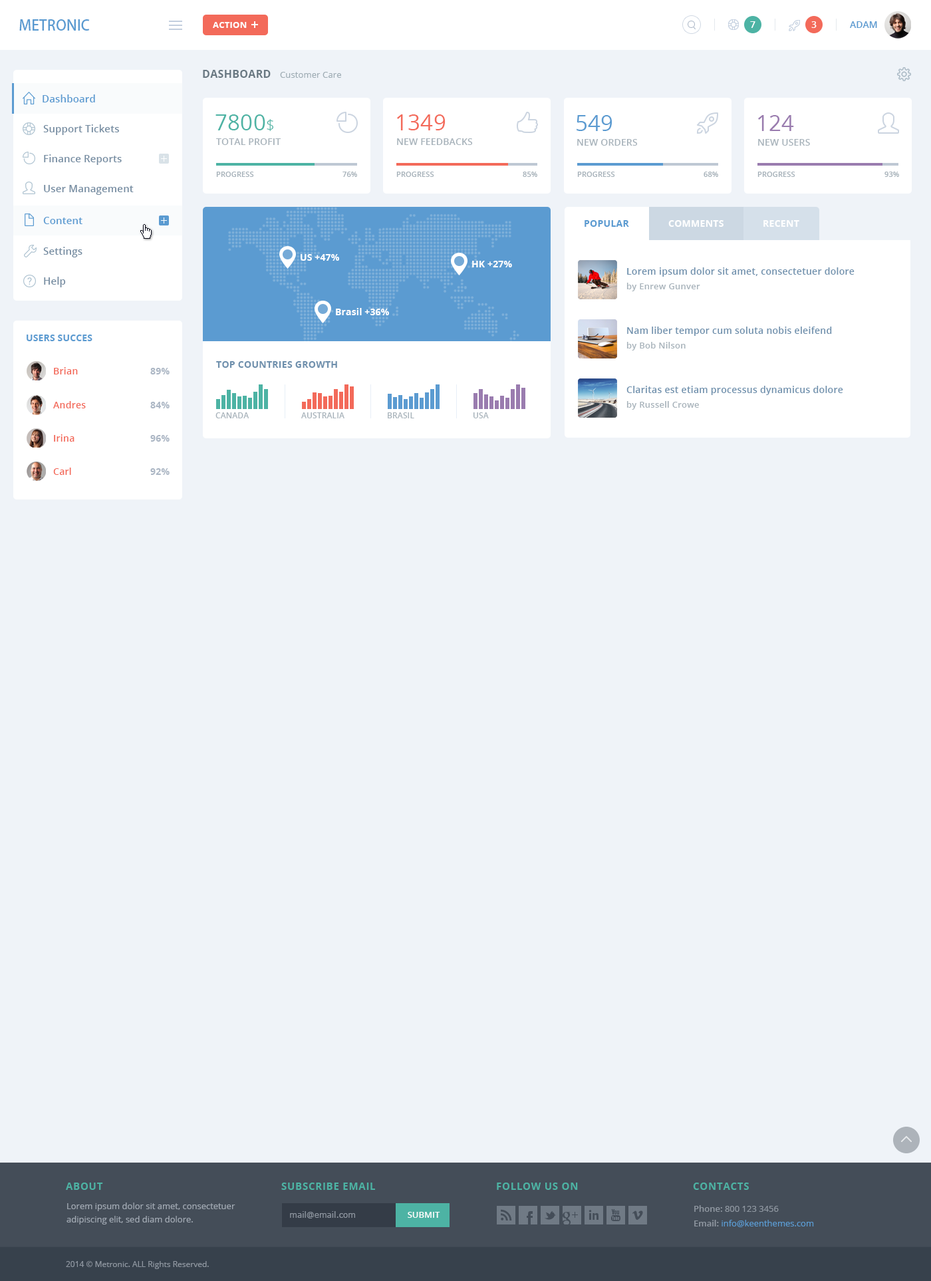
<style>
.page{position:relative;width:931px;height:1281px;background:#eff3f8}
.page>*{position:absolute;margin:0}
.t1{font:14.6px "KozGoPro-Medium";color:#5b9bd1}
.t2{font:8.6px "OpenSans-Bold";letter-spacing:0.02em;color:#ffffff}
.t3{font:9.3px "OpenSans-Semibold";letter-spacing:0.01em;color:#ffffff}
.t4{font:9.3px "OpenSans-Semibold";color:#5b9bd1}
.t5{font:10.6px "OpenSans-Bold";letter-spacing:0.02em;color:#697882}
.t6{font:8.6px "OpenSans";letter-spacing:0.01em;color:#9eacb4}
.t7{font:10px "OpenSans-Semibold";letter-spacing:0.01em;color:#5b9bd1}
.t8{font:10px "OpenSans-Semibold";letter-spacing:0.01em;color:#768da2}
.t9{font:21.9px "OpenSans";letter-spacing:0.01em;color:#4db3a4}
.t10{font:15.3px "OpenSans-Light";letter-spacing:0.01em;color:#4db3a4}
.t11{font:21.9px "OpenSans";letter-spacing:0.01em;color:#f36a5a}
.t12{font:21.9px "OpenSans";letter-spacing:0.01em;color:#5b9bd1}
.t13{font:21.9px "OpenSans";letter-spacing:0.01em;color:#9a7caf}
.t14{font:9.3px "OpenSans-Semibold";letter-spacing:0.01em;color:#a8b3bb}
.t15{font:7.3px "OpenSans-Semibold";letter-spacing:0.01em;color:#a8b3bb}
.t16{font:9.3px "OpenSans-Bold";letter-spacing:0.02em;color:#5b9bd1}
.t17{font:9.3px "OpenSans-Bold";letter-spacing:0.02em;color:#ffffff}
.t18{font:9.3px "OpenSans-Bold";letter-spacing:0.01em;color:#ffffff}
.t19{font:9.3px "OpenSans-Semibold";letter-spacing:0.02em;color:#6f90ad}
.t20{font:8.6px "OpenSans-Semibold";letter-spacing:0.02em;color:#a8b3bb}
.t21{font:9.3px "OpenSans-Bold";letter-spacing:0.01em;color:#5b9bd1}
.t22{font:9.3px "OpenSans-Bold";letter-spacing:0.02em;color:#6f90ad}
.t23{font:9.3px "OpenSans-Semibold";letter-spacing:0.02em;color:#f36a5a}
.t24{font:9.3px "OpenSans-Bold";letter-spacing:0.02em;color:#abb6c4}
.t25{font:8px "OpenSans-Semibold";letter-spacing:0.01em;color:#a8b3bb}
.t26{font:10px "OpenSans-Bold";letter-spacing:0.05em;color:#4db3a4}
.t27{font:8.6px/13.3px "OpenSans";color:#a1a9b3}
.t28{font:8.6px/14.6px "OpenSans";color:#5b9bd1}
.t29{font:8.6px/14.6px "OpenSans-Semibold";color:#8f97a1}
.t30{font:8.6px/14.6px "OpenSans";color:#8f97a1}
.t31{font:8px "Verdana";color:#8f97a1}
.t32{font:8.6px "OpenSans-Semibold";color:#fefefe}
.t33{font:8px "OpenSans";color:#8f97a1}
</style>
<div class="page">
<p class="t1" style="left:19px;top:19px;width:71px;height:12px">METRONIC</p>
<p class="t2" style="left:213px;top:22px;width:34px;height:6px">ACTION</p>
<p class="t3" style="left:750px;top:21px;width:5px;height:7px">7</p>
<p class="t3" style="left:811px;top:21px;width:6px;height:7px">3</p>
<p class="t4" style="left:850px;top:21px;width:27px;height:7px">ADAM</p>
<p class="t5" style="left:203px;top:70px;width:68px;height:8px">DASHBOARD</p>
<p class="t6" style="left:280px;top:72px;width:61px;height:6px">Customer Care</p>
<p class="t7" style="left:43px;top:94px;width:52px;height:8px">Dashboard</p>
<p class="t8" style="left:43px;top:124px;width:76px;height:11px">Support Tickets</p>
<p class="t9" style="left:215px;top:114px;width:58px;height:17px">7800<span class="t10">$</span></p>
<p class="t11" style="left:397px;top:114px;width:49px;height:16px">1349</p>
<p class="t12" style="left:577px;top:115px;width:35px;height:16px">549</p>
<p class="t13" style="left:758px;top:115px;width:36px;height:16px">124</p>
<p class="t14" style="left:216px;top:138px;width:65px;height:7px">TOTAL PROFIT</p>
<p class="t14" style="left:397px;top:138px;width:76px;height:7px">NEW FEEDBACKS</p>
<p class="t14" style="left:577px;top:139px;width:61px;height:7px">NEW ORDERS</p>
<p class="t14" style="left:758px;top:139px;width:52px;height:7px">NEW USERS</p>
<p class="t8" style="left:44px;top:154px;width:78px;height:11px">Finance Reports</p>
<p class="t15" style="left:216px;top:172px;width:38px;height:5px">PROGRESS</p>
<p class="t15" style="left:342px;top:172px;width:15px;height:5px">76%</p>
<p class="t15" style="left:396px;top:172px;width:38px;height:5px">PROGRESS</p>
<p class="t15" style="left:523px;top:172px;width:14px;height:5px">85%</p>
<p class="t15" style="left:577px;top:172px;width:38px;height:5px">PROGRESS</p>
<p class="t15" style="left:704px;top:172px;width:14px;height:5px">68%</p>
<p class="t15" style="left:757px;top:172px;width:38px;height:5px">PROGRESS</p>
<p class="t15" style="left:884px;top:172px;width:15px;height:5px">93%</p>
<p class="t8" style="left:44px;top:185px;width:90px;height:10px">User Management</p>
<p class="t7" style="left:43px;top:217px;width:39px;height:7px">Content</p>
<p class="t16" style="left:585px;top:220px;width:44px;height:7px">POPULAR</p>
<p class="t17" style="left:668px;top:220px;width:56px;height:7px">COMMENTS</p>
<p class="t17" style="left:763px;top:220px;width:36px;height:7px">RECENT</p>
<p class="t8" style="left:43px;top:247px;width:39px;height:10px">Settings</p>
<p class="t18" style="left:301px;top:254px;width:38px;height:7px">US +47%</p>
<p class="t18" style="left:472px;top:261px;width:40px;height:6px">HK +27%</p>
<p class="t19" style="left:627px;top:267px;width:228px;height:10px">Lorem ipsum dolor sit amet, consectetuer dolore</p>
<p class="t8" style="left:44px;top:277px;width:22px;height:10px">Help</p>
<p class="t20" style="left:626px;top:283px;width:74px;height:8px">by Enrew Gunver</p>
<p class="t18" style="left:336px;top:308px;width:53px;height:7px">Brasil +36%</p>
<p class="t19" style="left:627px;top:327px;width:205px;height:9px">Nam liber tempor cum soluta nobis eleifend</p>
<p class="t21" style="left:27px;top:334px;width:65px;height:7px">USERS SUCCES</p>
<p class="t20" style="left:626px;top:342px;width:60px;height:8px">by Bob Nilson</p>
<p class="t22" style="left:216px;top:361px;width:121px;height:7px">TOP COUNTRIES GROWTH</p>
<p class="t23" style="left:54px;top:367px;width:24px;height:7px">Brian</p>
<p class="t24" style="left:150px;top:368px;width:20px;height:6px">89%</p>
<p class="t19" style="left:626px;top:386px;width:217px;height:9px">Claritas est etiam processus dynamicus dolore</p>
<p class="t23" style="left:53px;top:401px;width:33px;height:7px">Andres</p>
<p class="t24" style="left:150px;top:402px;width:20px;height:6px">84%</p>
<p class="t20" style="left:626px;top:401px;width:73px;height:9px">by Russell Crowe</p>
<p class="t25" style="left:215px;top:412px;width:34px;height:6px">CANADA</p>
<p class="t25" style="left:301px;top:412px;width:43px;height:6px">AUSTRALIA</p>
<p class="t25" style="left:388px;top:412px;width:26px;height:6px">BRASIL</p>
<p class="t25" style="left:473px;top:412px;width:16px;height:6px">USA</p>
<p class="t23" style="left:54px;top:434px;width:20px;height:8px">Irina</p>
<p class="t24" style="left:150px;top:435px;width:20px;height:7px">96%</p>
<p class="t23" style="left:53px;top:467px;width:18px;height:8px">Carl</p>
<p class="t24" style="left:150px;top:468px;width:20px;height:7px">92%</p>
<p class="t26" style="left:66px;top:1182px;width:37px;height:8px">ABOUT</p>
<p class="t26" style="left:281px;top:1182px;width:94px;height:8px">SUBSCRIBE EMAIL</p>
<p class="t26" style="left:497px;top:1182px;width:81px;height:8px">FOLLOW US ON</p>
<p class="t26" style="left:693px;top:1182px;width:56px;height:8px">CONTACTS</p>
<p class="t27" style="left:67px;top:1202px;width:168px;height:22px">Lorem ipsum dolor sit amet, consectetuer <br>adipiscing elit, sed diam dolore.</p>
<p class="t28" style="left:694px;top:1205px;width:120px;height:22px"><span class="t29">Phone: </span><span class="t30">800 123 3456<br></span><span class="t29">Email: </span>info@keenthemes.com</p>
<p class="t31" style="left:290px;top:1211px;width:65px;height:7px">mail@email.com</p>
<p class="t32" style="left:408px;top:1212px;width:32px;height:6px">SUBMIT</p>
<p class="t33" style="left:66px;top:1261px;width:143px;height:8px">2014 © Metronic. ALL Rights Reserved.</p>
</div>
